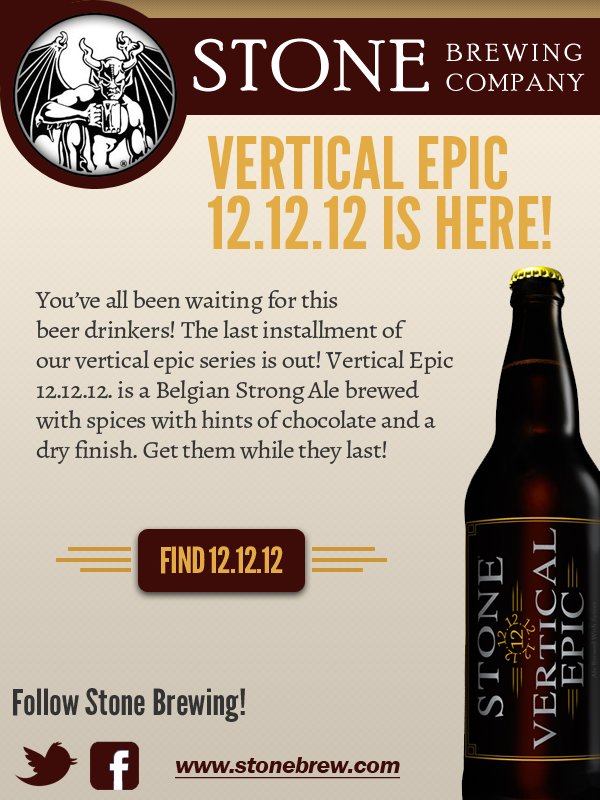
<style>
.page{position:relative;width:600px;height:800px}
.page>*{position:absolute;margin:0}
.t1{font:72px "PoorRichard-Regular";letter-spacing:0.05em;color:#ffffff;scale:1.08 1}
.t2{font:24px/30px "PoorRichard-Regular";letter-spacing:0.16em;color:#ffffff;scale:1.08 1}
.t3{font:24px/30px "PoorRichard-Regular";letter-spacing:0.1em;color:#ffffff;scale:1.08 1}
.t4{font:72px/60px "LeagueGothic-Regular";color:#e3ab43;scale:1.08 1}
.t5{font:24px/30px "Alegreya-Regular";letter-spacing:-0.025em;color:#333333;scale:1.08 1}
.t6{font:36px "LeagueGothic-Regular";letter-spacing:-0.025em;color:#e3ab43;scale:1.08 1}
.t7{font:36px "LeagueGothic-Regular";color:#333333;scale:1.08 1}
.t8{font:24px "FranklinGothic-DemiItalic";letter-spacing:-0.025em;color:#3e0c08;text-decoration:underline;scale:1.08 1}
</style>
<div class="page">
<p class="t1" style="left:193px;top:38px;width:236px;height:54px">STONE</p>
<p class="t2" style="left:446px;top:43px;width:139px;height:49px">BREWING<br><span class="t3">COMPANY</span></p>
<p class="t4" style="left:207px;top:135px;width:344px;height:115px">VERTICAL EPIC<br>12.12.12 IS HERE!</p>
<p class="t5" style="left:35px;top:290px;width:418px;height:174px">You’ve all been waiting for this <br>beer drinkers! The last installment of <br>our vertical epic series is out! Vertical Epic 12.12.12. is a Belgian Strong Ale brewed with spices with hints of chocolate and a dry finish. Get them while they last!</p>
<p class="t6" style="left:161px;top:546px;width:122px;height:28px">FIND 12.12.12</p>
<p class="t7" style="left:13px;top:688px;width:232px;height:34px">Follow Stone Brewing!</p>
<p class="t8" style="left:175px;top:757px;width:225px;height:22px">www.stonebrew.com</p>
</div>
